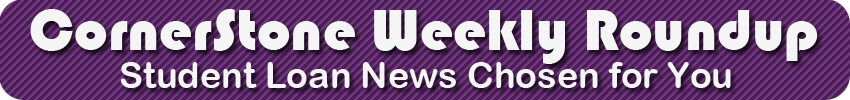
<style>
.page{position:relative;width:850px;height:100px;background:#f5f5f5}
.page>*{position:absolute;margin:0}
.t1{font:60px "Bauhaus93";color:#f5f5f5}
.t2{font:36px "ArialRoundedMTBold";color:#f5f5f5}
</style>
<div class="page">
<p class="t1" style="left:30px;top:9px;width:788px;height:55px">CornerStone Weekly Roundup</p>
<p class="t2" style="left:120px;top:62px;width:611px;height:26px">Student Loan News Chosen for You</p>
</div>
